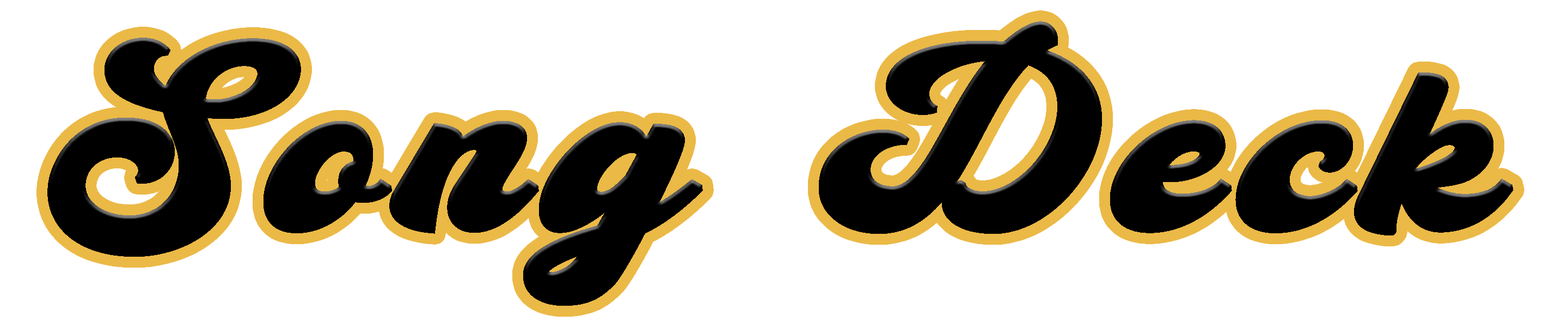
<style>
.page{position:relative;width:1568px;height:327px;background:#ffffff}
.page>*{position:absolute;margin:0}
.t1{font:217.8px "AnalogScriptCleanPERSONAL-Personal";letter-spacing:0.05em;color:#000000;font-weight:bold;scale:1.25 1}
</style>
<div class="page">
<p class="t1" style="left:47px;top:21px;width:1467px;height:284px">Song Deck</p>
</div>
